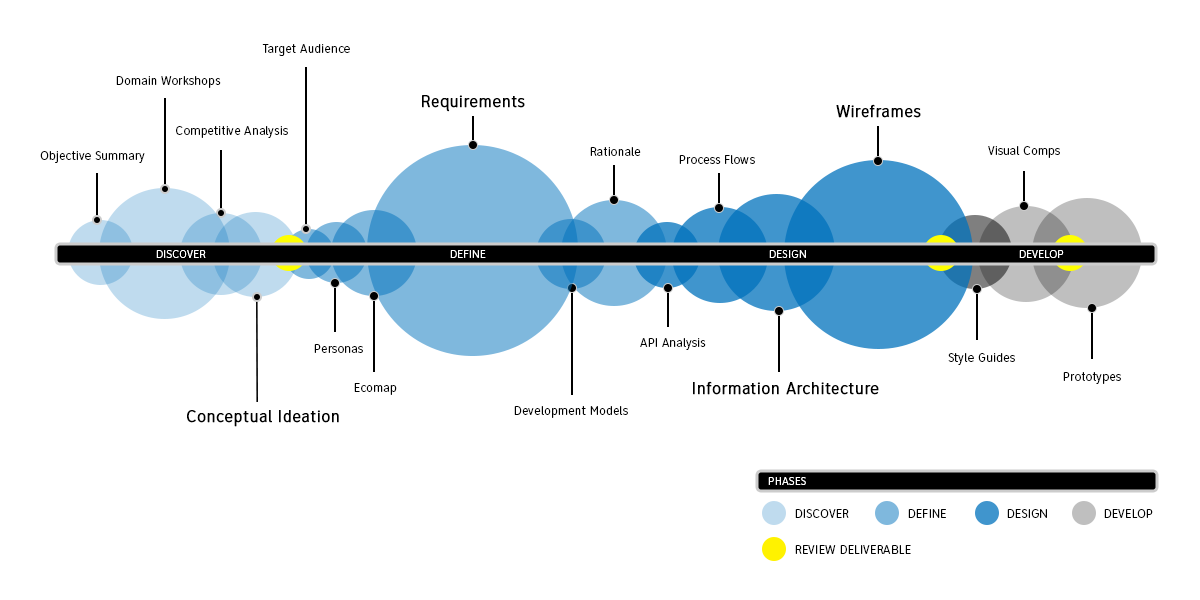
<style>
.page{position:relative;width:1200px;height:600px;background:#ffffff}
.page>*{position:absolute;margin:0}
.t1{font:13.2px "ClearviewATT-Light";letter-spacing:0.025em;color:#000000;scale:0.91 1}
.t2{font:17.6px "ClearviewATT-Light";letter-spacing:0.025em;color:#000000;font-weight:bold;scale:0.91 1}
.t3{font:12.1px "ClearviewATT-Light";letter-spacing:0.025em;color:#ffffff;scale:0.91 1}
</style>
<div class="page">
<p class="t1" style="left:262px;top:44px;width:88px;height:12px">Target Audience</p>
<p class="t1" style="left:116px;top:76px;width:105px;height:12px">Domain Workshops</p>
<p class="t2" style="left:422px;top:95px;width:103px;height:17px">Requirements</p>
<p class="t2" style="left:836px;top:104px;width:85px;height:14px">Wireframes</p>
<p class="t1" style="left:176px;top:126px;width:112px;height:12px">Competitive Analysis</p>
<p class="t1" style="left:590px;top:147px;width:51px;height:9px">Rationale</p>
<p class="t1" style="left:988px;top:146px;width:72px;height:12px">Visual Comps</p>
<p class="t1" style="left:40px;top:151px;width:105px;height:12px">Objective Summary</p>
<p class="t1" style="left:679px;top:155px;width:76px;height:9px">Process Flows</p>
<p class="t3" style="left:156px;top:250px;width:50px;height:8px">DISCOVER</p>
<p class="t3" style="left:450px;top:250px;width:36px;height:8px">DEFINE</p>
<p class="t3" style="left:769px;top:250px;width:37px;height:8px">DESIGN</p>
<p class="t3" style="left:1019px;top:250px;width:45px;height:8px">DEVELOP</p>
<p class="t1" style="left:640px;top:338px;width:66px;height:12px">API Analysis</p>
<p class="t1" style="left:314px;top:344px;width:49px;height:9px">Personas</p>
<p class="t1" style="left:948px;top:353px;width:67px;height:12px">Style Guides</p>
<p class="t1" style="left:1063px;top:372px;width:58px;height:12px">Prototypes</p>
<p class="t1" style="left:354px;top:383px;width:43px;height:12px">Ecomap</p>
<p class="t2" style="left:693px;top:381px;width:186px;height:14px">Information Architecture</p>
<p class="t2" style="left:187px;top:410px;width:152px;height:17px">Conceptual Ideation</p>
<p class="t1" style="left:514px;top:406px;width:114px;height:12px">Development Models</p>
<p class="t3" style="left:768px;top:477px;width:38px;height:8px">PHASES</p>
<p class="t1" style="left:795px;top:509px;width:54px;height:9px">DISCOVER</p>
<p class="t1" style="left:908px;top:509px;width:38px;height:9px">DEFINE</p>
<p class="t1" style="left:1007px;top:509px;width:40px;height:9px">DESIGN</p>
<p class="t1" style="left:1104px;top:509px;width:49px;height:9px">DEVELOP</p>
<p class="t1" style="left:795px;top:545px;width:116px;height:9px">REVIEW DELIVERABLE</p>
</div>
